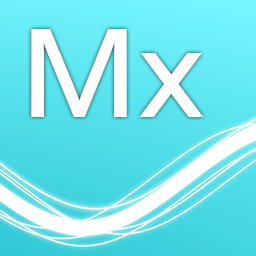
<style>
.page{position:relative;width:256px;height:256px}
.page>*{position:absolute;margin:0}
.t1{font:124px "Kalinga-Bold";color:#ffffff}
</style>
<div class="page">
<p class="t1" style="left:31px;top:29px;width:173px;height:88px">Mx</p>
</div>
